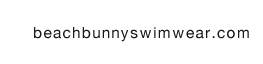
<style>
.page{position:relative;width:263px;height:64px;background:#ffffff}
.page>*{position:absolute;margin:0}
.t1{font:15.3px "HelveticaNeue";letter-spacing:0.1em;color:#1a1a1a}
</style>
<div class="page">
<p class="t1" style="left:34px;top:27px;width:215px;height:15px">beachbunnyswimwear.com</p>
</div>
